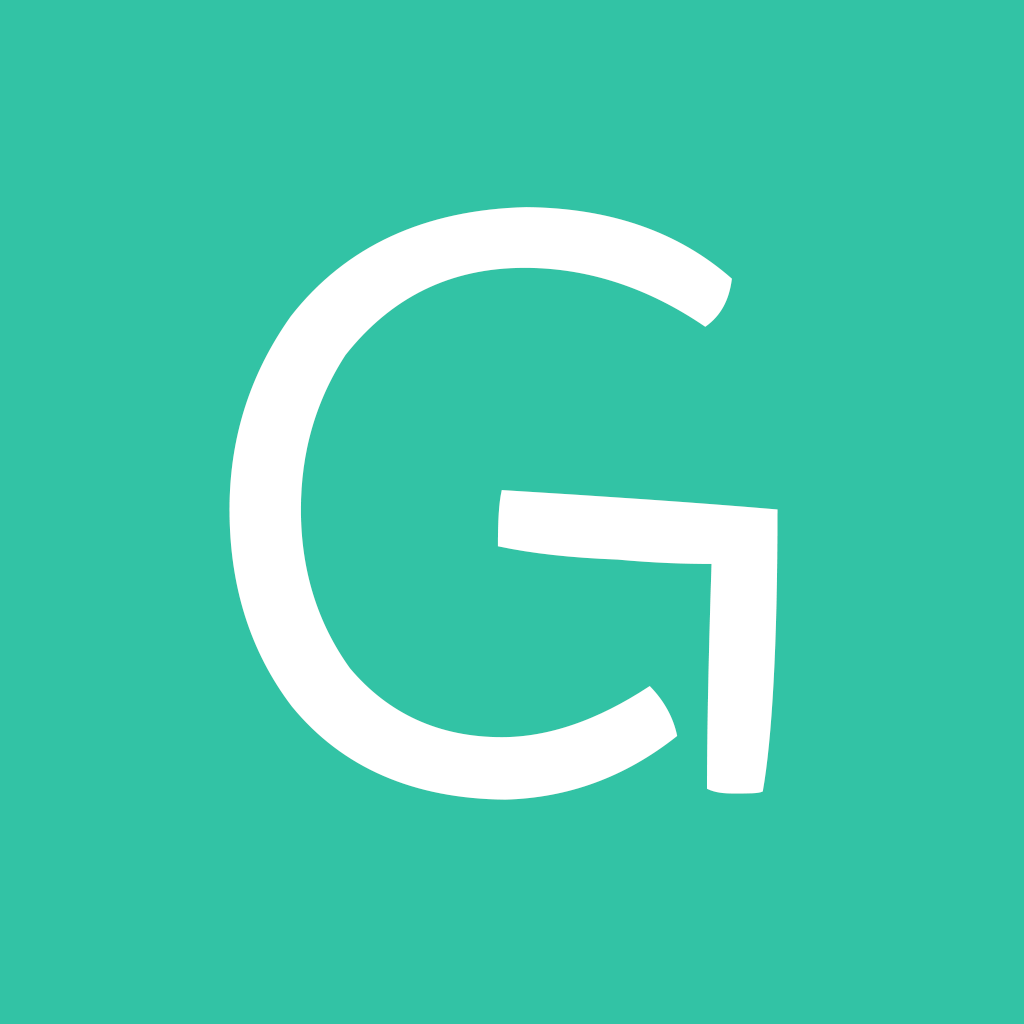
<style>
.page{position:relative;width:1024px;height:1024px;background:#32c3a5}
.page>*{position:absolute;margin:0}
.t1{font:876.1px "DFWaWaSC-W5";letter-spacing:-0.01em;color:#ffffff;font-weight:bold;scale:1.04 1}
</style>
<div class="page">
<p class="t1" style="left:229px;top:207px;width:549px;height:593px">G</p>
</div>
